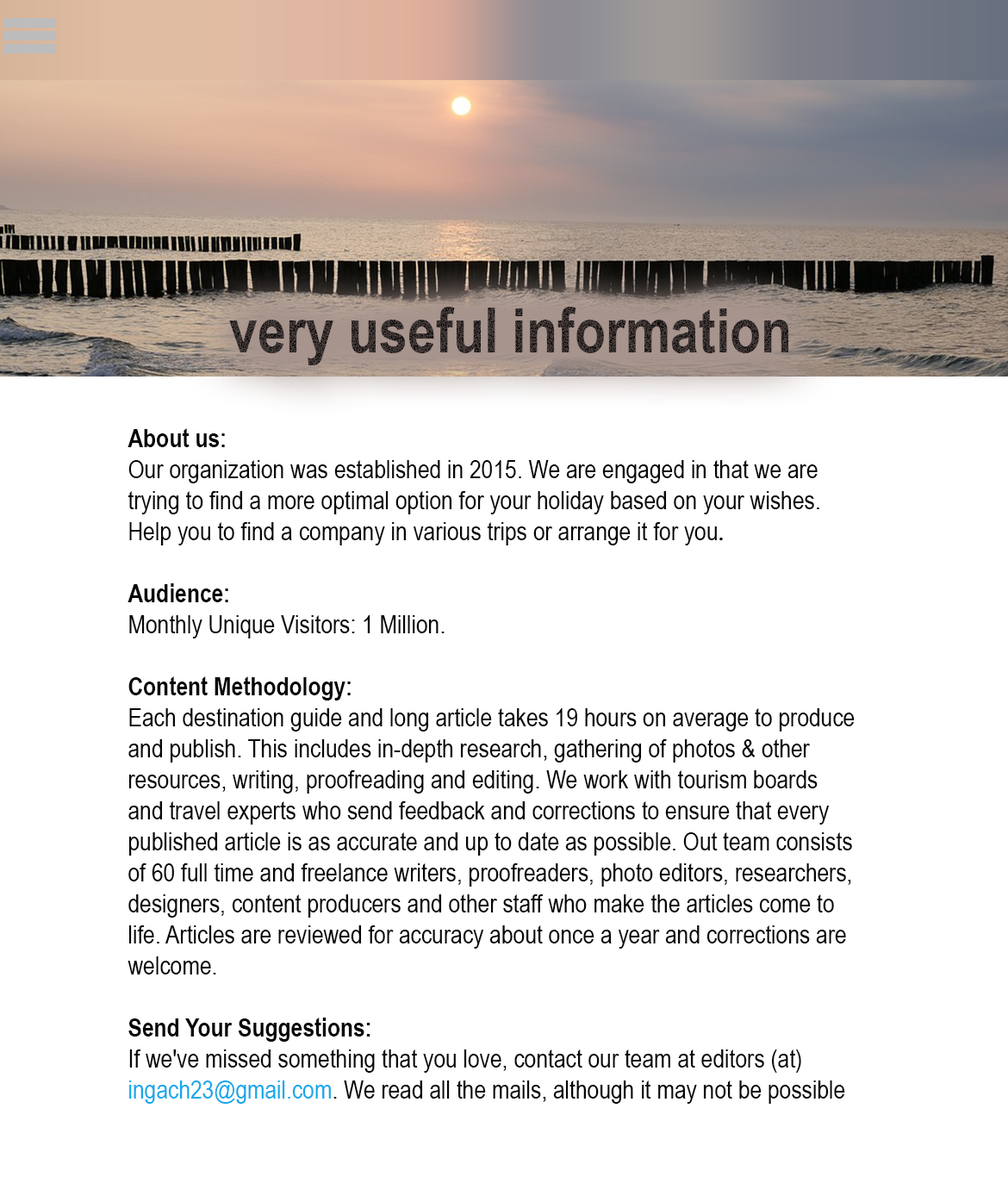
<style>
.page{position:relative;width:1008px;height:1183px;background:#ffffff}
.page>*{position:absolute;margin:0}
.t1{font:62px "ArialNarrow-Bold"}
.t2{font:25.8px "ArialNarrow";color:#060607}
.t3{font:25.8px "ArialNarrow-Bold";color:#060607}
.t4{font:25.8px "ArialNarrow";color:#16a8eb}
.t5{font:25.8px "ArialNarrow";color:#000000}
</style>
<div class="page">
<p class="t1" style="left:229px;top:307px;width:560px;height:58px">very useful information</p>
<p class="t2" style="left:128px;top:428px;width:727px;height:676px"><span class="t3">About us:<br></span>Our organization was established in 2015. We are engaged in that we are trying to find a more optimal option for your holiday based on your wishes. Help you to find a company in various trips or arrange it for you<span class="t3">.<br><br>Audience:<br></span>Monthly Unique Visitors: 1 Million.<br><br><span class="t3">Content Methodology: <br></span>Each destination guide and long article takes 19 hours on average to produce and publish. This includes in-depth research, gathering of photos &amp; other resources, writing, proofreading and editing. We work with tourism boards and travel experts who send feedback and corrections to ensure that every published article is as accurate and up to date as possible. Out team consists of 60 full time and freelance writers, proofreaders, photo editors, researchers, designers, content producers and other staff who make the articles come to life. Articles are reviewed for accuracy about once a year and corrections are welcome.<br><br><span class="t3">Send Your Suggestions:<br></span>If we've missed something that you love, contact our team at editors (at) <span class="t4">ingach23@gmail.com</span>. We read all the mails, although it may not be possible to respond to each one individually. <br><br><span class="t3">Join the Conversation:<br></span>Let's connect on <span class="t4">Twitter</span>, <span class="t4">Google+, </span><span class="t5">,</span><span class="t4">Facebook</span> and <span class="t4">Instagram</span><span class="t5">.<br>.</span></p>
</div>
